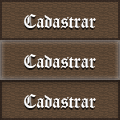
<style>
.page{position:relative;width:120px;height:120px;background:#5a4634}
.page>*{position:absolute;margin:0}
.t1{font:18px "OldEnglishTextMT";color:#ffffff}
</style>
<div class="page">
<p class="t1" style="left:24px;top:14px;width:72px;height:14px">Cadastrar</p>
<p class="t1" style="left:24px;top:54px;width:72px;height:14px">Cadastrar</p>
<p class="t1" style="left:24px;top:94px;width:72px;height:14px">Cadastrar</p>
</div>
